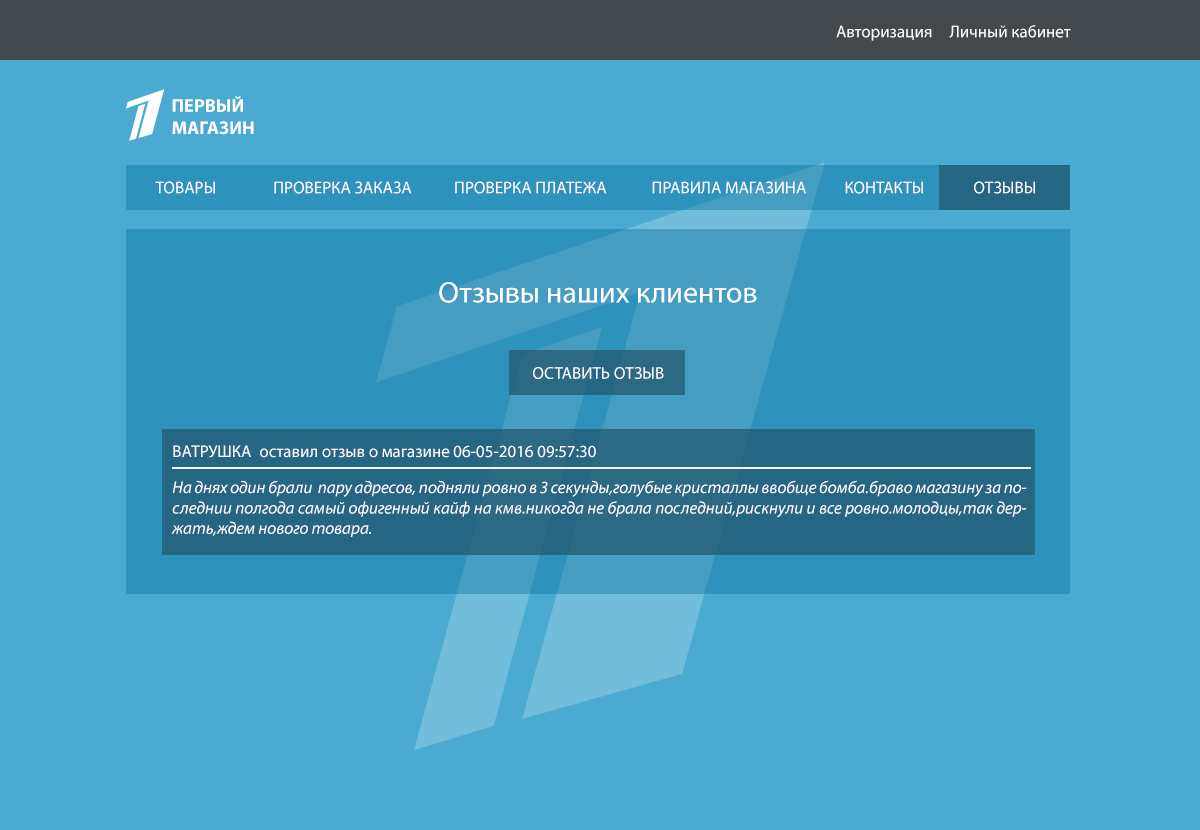
<style>
.page{position:relative;width:1200px;height:830px;background:#4aaad2}
.page>*{position:absolute;margin:0}
.t1{font:17px "MyriadPro-Regular";color:#ffffff}
.t2{font:18.5px "MyriadPro-Bold";color:#ffffff;text-transform:uppercase}
.t3{font:30px "MyriadPro-Regular";color:#ffffff}
.t4{font:17px "MyriadPro-It";color:#ffffff}
</style>
<div class="page">
<p class="t1" style="left:836px;top:25px;width:96px;height:16px">Авторизация</p>
<p class="t1" style="left:949px;top:25px;width:122px;height:13px">Личный кабинет</p>
<p class="t2" style="left:172px;top:96px;width:82px;height:39px">Первый <br>магазин</p>
<p class="t1" style="left:155px;top:181px;width:60px;height:13px">ТОВАРЫ</p>
<p class="t1" style="left:274px;top:181px;width:138px;height:13px">ПРОВЕРКА ЗАКАЗА</p>
<p class="t1" style="left:455px;top:181px;width:152px;height:13px">ПРОВЕРКА ПЛАТЕЖА</p>
<p class="t1" style="left:652px;top:181px;width:154px;height:13px">ПРАВИЛА МАГАЗИНА</p>
<p class="t1" style="left:845px;top:181px;width:78px;height:13px">КОНТАКТЫ</p>
<p class="t1" style="left:974px;top:181px;width:61px;height:13px">ОТЗЫВЫ</p>
<p class="t3" style="left:439px;top:282px;width:318px;height:21px">Отзывы наших клиентов</p>
<p class="t1" style="left:533px;top:367px;width:131px;height:12px">ОСТАВИТЬ ОТЗЫВ</p>
<p class="t1" style="left:173px;top:445px;width:78px;height:13px">ВАТРУШКА</p>
<p class="t1" style="left:260px;top:445px;width:336px;height:13px">оставил отзыв о магазине 06-05-2016 09:57:30</p>
<p class="t4" style="left:171px;top:480px;width:856px;height:57px;text-align:justify">На днях один брали  пару адресов, подняли ровно в 3 секунды,голубые кристаллы ввобще бомба.браво магазину за последнии полгода самый офигенный кайф на кмв.никогда не брала последний,рискнули и все ровно.молодцы,так держать,ждем нового товара.</p>
</div>
